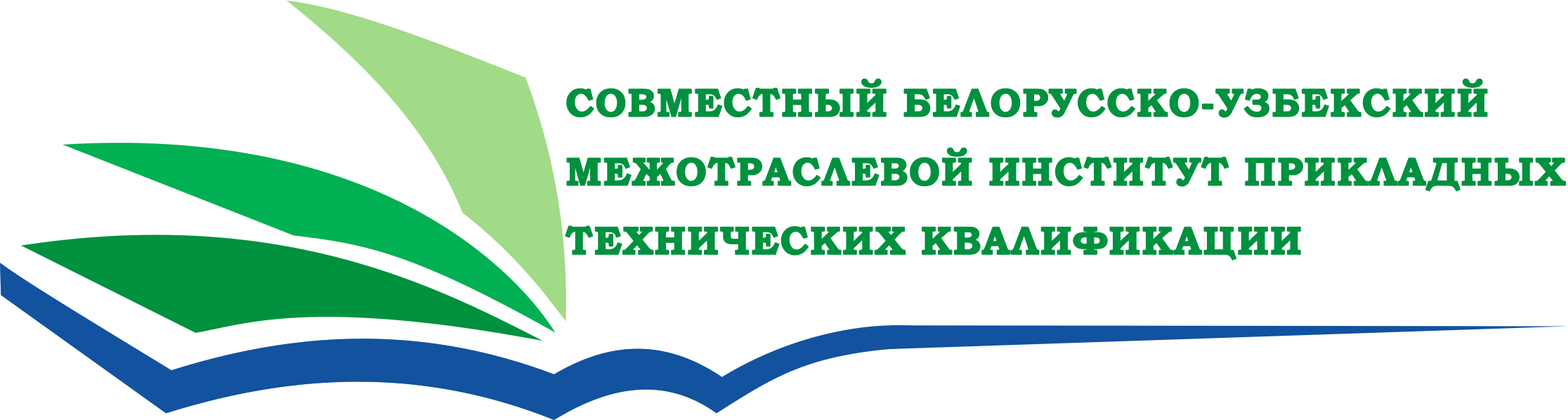
<style>
.page{position:relative;width:1568px;height:420px;background:#ffffff}
.page>*{position:absolute;margin:0}
.t1{font:39.5px/69px "BookmanOldStyle-Bold";letter-spacing:0.01em;color:#00913e;font-weight:bold}
</style>
<div class="page">
<p class="t1" style="left:565px;top:78px;width:1001px;height:183px">СОВМЕСТНЫЙ БЕЛОРУССКО-УЗБЕКСКИЙ <br>МЕЖОТРАСЛЕВОЙ ИНСТИТУТ ПРИКЛАДНЫХ <br>ТЕХНИЧЕСКИХ КВАЛИФИКАЦИИ</p>
</div>
